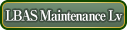
<style>
.page{position:relative;width:127px;height:30px}
.page>*{position:absolute;margin:0}
.t1{font:14px "RyuminPro-ExBold";letter-spacing:-0.08em;color:#ffffff;scale:0.9 1}
</style>
<div class="page">
<p class="t1" style="left:5px;top:10px;width:118px;height:11px">LBAS Maintenance Lv</p>
</div>
